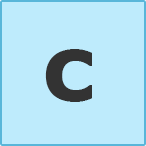
<style>
.page{position:relative;width:146px;height:146px;background:#beebfc}
.page>*{position:absolute;margin:0}
.t1{font:90px "Verdana-Bold";color:#333333}
</style>
<div class="page">
<p class="t1" style="left:45px;top:49px;width:47px;height:53px">c</p>
</div>
